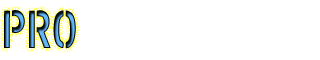
<style>
.page{position:relative;width:320px;height:60px;background:#ffffff}
.page>*{position:absolute;margin:0}
.t1{font:52.7px "XXIISTRAIGHT-ARMY"}
</style>
<div class="page">
<p class="t1" style="left:4px;top:10px;width:72px;height:39px">PRO</p>
</div>
